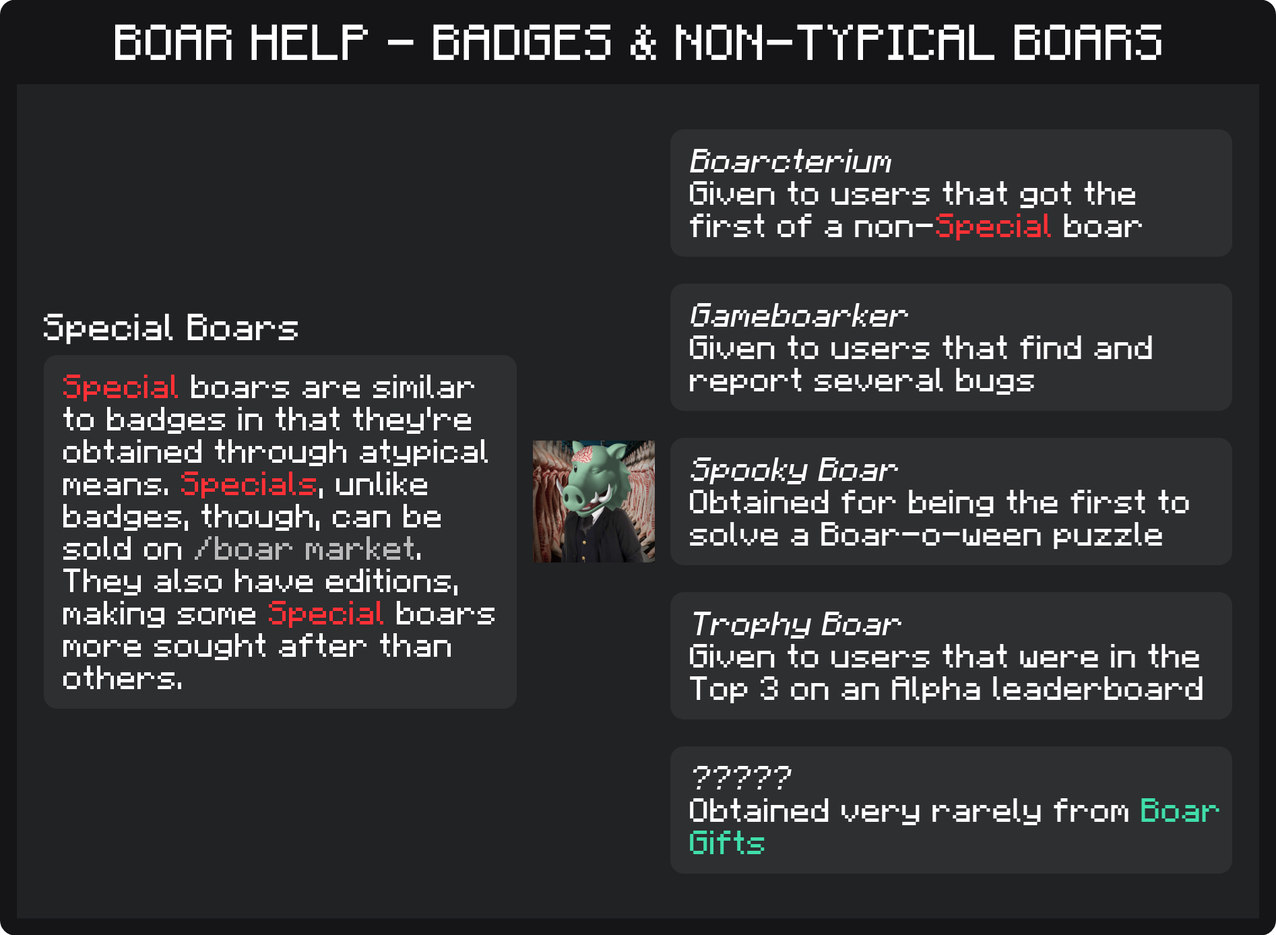
<style>
.page{position:relative;width:1276px;height:935px;background:#212224}
.page>*{position:absolute;margin:0}
.t1{font:40.4px "F77-Minecraft";color:#ffffff}
.t2{font:26.9px "F77-Minecraft";color:#ffffff}
.t3{font:26.9px "F77-Minecraft";color:#ffffff;font-style:italic}
.t4{font:26.9px "F77-Minecraft";color:#ff3136}
.t5{font:30.3px "F77-Minecraft";color:#ffffff}
.t6{font:26.9px "F77-Minecraft";color:#bababa}
.t7{font:26.9px "F77-Minecraft";color:#40dea9}
</style>
<div class="page">
<p class="t1" style="left:115px;top:24px;width:1046px;height:36px">BOAR HELP - BADGES &amp; NON-TYPICAL BOARS</p>
<p class="t2" style="left:690px;top:149px;width:452px;height:91px"><span class="t3">Boarcterium<br></span>Given to users that got the <br>first of a non-<span class="t4">Special </span>boar</p>
<p class="t2" style="left:690px;top:303px;width:462px;height:92px"><span class="t3">Gameboarker<br></span>Given to users that find and<br>report several bugs</p>
<p class="t5" style="left:44px;top:313px;width:254px;height:31px">Special Boars</p>
<p class="t2" style="left:63px;top:374px;width:431px;height:315px"><span class="t4">Special </span>boars are similar<br>to badges in that they're<br>obtained through atypical<br>means. <span class="t4">Specials</span>, unlike<br>badges, though, can be<br>sold on <span class="t6">/boar market</span>.<br>They also have editions,<br>making some <span class="t4">Special </span>boars<br>more sought after than<br>others.</p>
<p class="t2" style="left:690px;top:457px;width:499px;height:92px"><span class="t3">Spooky Boar<br></span>Obtained for being the first to <br>solve a Boar-o-ween puzzle</p>
<p class="t2" style="left:690px;top:612px;width:512px;height:91px"><span class="t3">Trophy Boar<br></span>Given to users that were in the<br>Top 3 on an Alpha leaderboard</p>
<p class="t2" style="left:690px;top:766px;width:529px;height:88px"><span class="t3">?????<br></span>Obtained very rarely from <span class="t7">Boar<br>Gifts</span></p>
</div>
